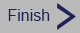
<style>
.page{position:relative;width:80px;height:33px;background:#bababa}
.page>*{position:absolute;margin:0}
.t1{font:16px "ArialMT";color:#202054}
</style>
<div class="page">
<p class="t1" style="left:8px;top:9px;width:42px;height:12px">Finish</p>
</div>
